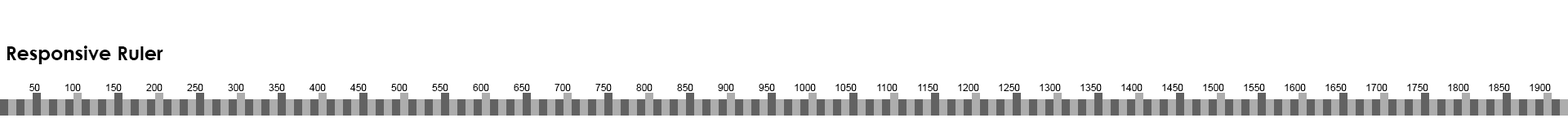
<style>
.page{position:relative;width:1568px;height:131px;background:#ffffff}
.page>*{position:absolute;margin:0}
.t1{font:19.4px "CenturyGothic-Bold";color:#000000}
.t2{font:9.8px "ArialMT";color:#000000}
</style>
<div class="page">
<p class="t1" style="left:7px;top:46px;width:156px;height:19px">Responsive Ruler</p>
<p class="t2" style="left:29px;top:84px;width:11px;height:7px">50</p>
<p class="t2" style="left:65px;top:84px;width:16px;height:7px">100</p>
<p class="t2" style="left:106px;top:84px;width:16px;height:7px">150</p>
<p class="t2" style="left:146px;top:84px;width:17px;height:7px">200</p>
<p class="t2" style="left:187px;top:84px;width:16px;height:7px">250</p>
<p class="t2" style="left:228px;top:84px;width:16px;height:7px">300</p>
<p class="t2" style="left:269px;top:84px;width:16px;height:7px">350</p>
<p class="t2" style="left:310px;top:84px;width:16px;height:7px">400</p>
<p class="t2" style="left:350px;top:84px;width:17px;height:7px">450</p>
<p class="t2" style="left:391px;top:84px;width:17px;height:7px">500</p>
<p class="t2" style="left:432px;top:84px;width:16px;height:7px">550</p>
<p class="t2" style="left:473px;top:84px;width:16px;height:7px">600</p>
<p class="t2" style="left:514px;top:84px;width:16px;height:7px">650</p>
<p class="t2" style="left:555px;top:84px;width:16px;height:7px">700</p>
<p class="t2" style="left:595px;top:84px;width:17px;height:7px">750</p>
<p class="t2" style="left:636px;top:84px;width:17px;height:7px">800</p>
<p class="t2" style="left:677px;top:84px;width:16px;height:7px">850</p>
<p class="t2" style="left:718px;top:84px;width:16px;height:7px">900</p>
<p class="t2" style="left:759px;top:84px;width:16px;height:7px">950</p>
<p class="t2" style="left:795px;top:84px;width:21px;height:7px">1000</p>
<p class="t2" style="left:835px;top:84px;width:22px;height:7px">1050</p>
<p class="t2" style="left:877px;top:84px;width:21px;height:7px">1100</p>
<p class="t2" style="left:918px;top:84px;width:20px;height:7px">1150</p>
<p class="t2" style="left:958px;top:84px;width:21px;height:7px">1200</p>
<p class="t2" style="left:999px;top:84px;width:21px;height:7px">1250</p>
<p class="t2" style="left:1040px;top:84px;width:21px;height:7px">1300</p>
<p class="t2" style="left:1080px;top:84px;width:22px;height:7px">1350</p>
<p class="t2" style="left:1121px;top:84px;width:22px;height:7px">1400</p>
<p class="t2" style="left:1162px;top:84px;width:21px;height:7px">1450</p>
<p class="t2" style="left:1203px;top:84px;width:21px;height:7px">1500</p>
<p class="t2" style="left:1244px;top:84px;width:21px;height:7px">1550</p>
<p class="t2" style="left:1285px;top:84px;width:21px;height:7px">1600</p>
<p class="t2" style="left:1325px;top:84px;width:22px;height:7px">1650</p>
<p class="t2" style="left:1366px;top:84px;width:22px;height:7px">1700</p>
<p class="t2" style="left:1407px;top:84px;width:21px;height:7px">1750</p>
<p class="t2" style="left:1448px;top:84px;width:21px;height:7px">1800</p>
<p class="t2" style="left:1489px;top:84px;width:21px;height:7px">1850</p>
<p class="t2" style="left:1530px;top:84px;width:21px;height:7px">1900</p>
</div>
